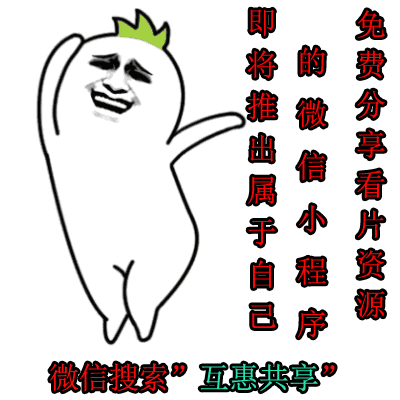
<style>
.page{position:relative;width:400px;height:400px;background:#ffffff}
.page>*{position:absolute;margin:0}
.t1{font:30px/42px "SimSun";color:#f90606}
.t2{font:30px/40px "SimSun";color:#f90606}
.t3{font:30px "SimSun";color:#f90606}
</style>
<div class="page">
<p class="t1" style="left:247px;top:9px;width:29px;height:319px">即<br>将<br>推<br>出<br>属<br>于<br>自<br>己</p>
<p class="t2" style="left:357px;top:10px;width:28px;height:308px">免<br>费<br>分<br>享<br>看<br>片<br>资<br>源</p>
<p class="t3" style="left:298px;top:47px;width:28px;height:291px">的<br>微<br>信<br>小<br>程<br>序</p>
</div>
